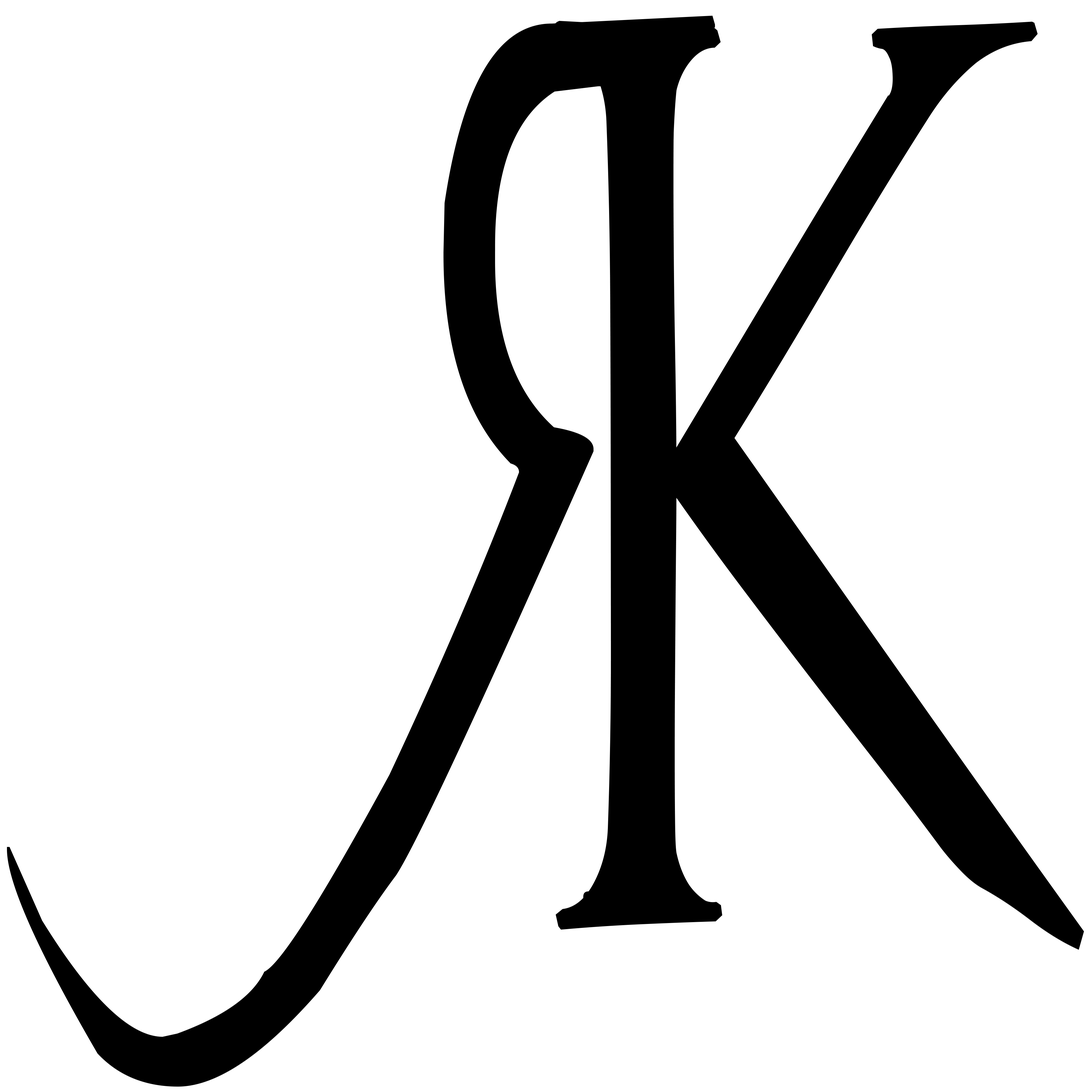
<style>
.page{position:relative;width:1092px;height:1092px;background:#ffffff}
.page>*{position:absolute;margin:0}
.t1{font:1131px "PrincesSANDTHEFROG";color:#000000;scale:0.46 1}
.t2{font:1138.9px "PrincesSANDTHEFROG";color:#000000;scale:0.59 1}
</style>
<div class="page">
<p class="t1" style="left:7px;top:15px;width:708px;height:1072px;rotate:-180deg">R</p>
<p class="t2" style="left:553px;top:21px;width:531px;height:929px">K</p>
</div>
